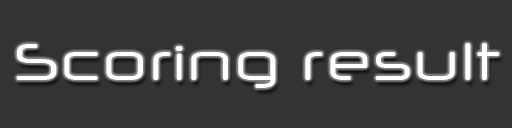
<style>
.page{position:relative;width:512px;height:128px;background:#333333}
.page>*{position:absolute;margin:0}
.t1{font:52px "NeuropolXFree";color:#ffffff}
</style>
<div class="page">
<p class="t1" style="left:16px;top:43px;width:484px;height:45px">Scoring result</p>
</div>
